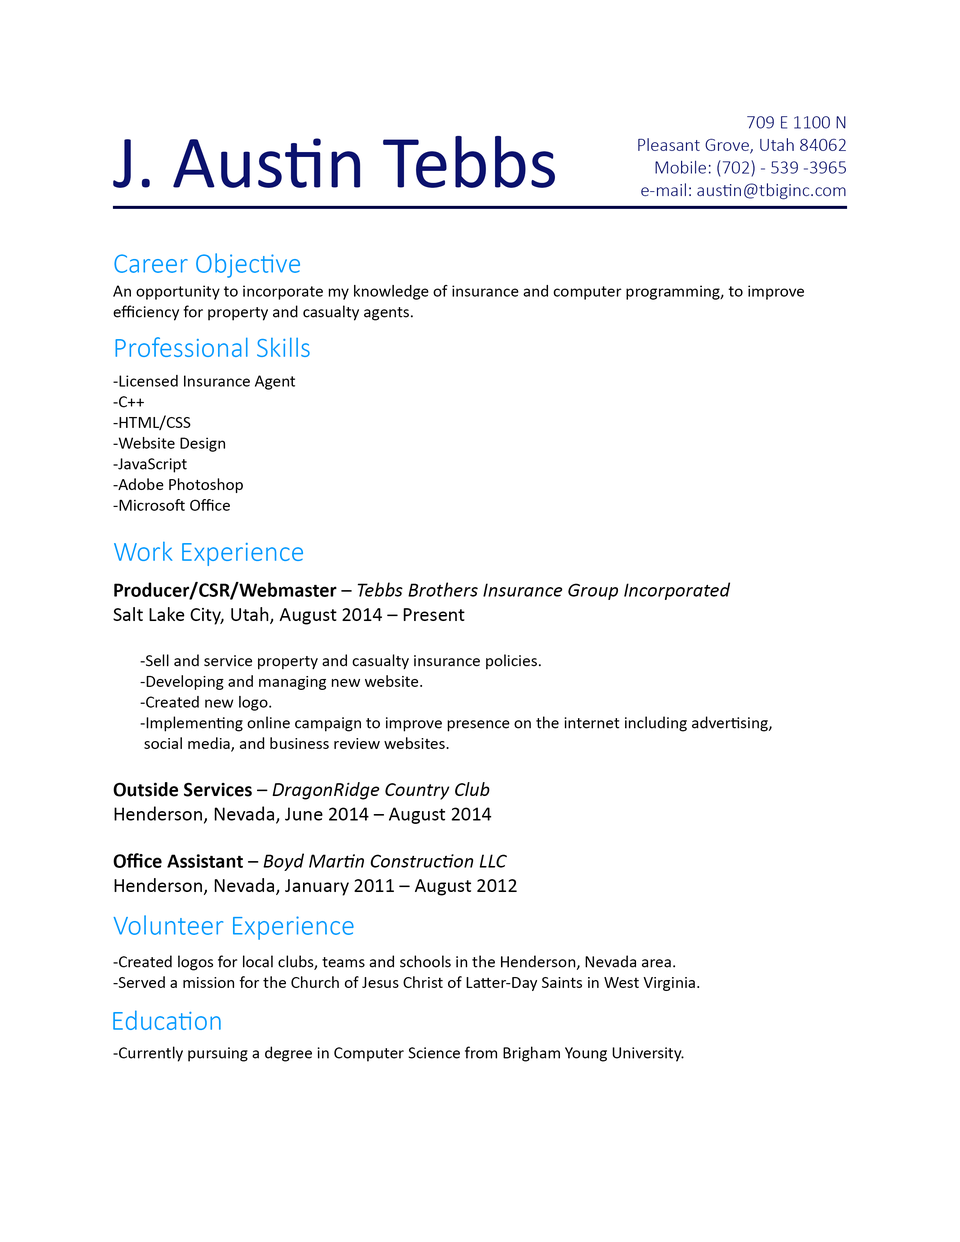
<style>
.page{position:relative;width:960px;height:1242px;background:#ffffff}
.page>*{position:absolute;margin:0}
.t1{font:18.8px "Calibri-Light";color:#0b126e}
.t2{font:75.3px "Calibri";color:#0b126e}
.t3{font:28.2px "Calibri-Light";color:#009cff}
.t4{font:17.3px "Calibri";color:#000000}
.t5{font:20.4px "Calibri-Bold";color:#000000}
.t6{font:20.4px "Calibri";color:#000000}
.t7{font:20.4px "Calibri-Italic";color:#000000}
</style>
<div class="page">
<p class="t1" style="left:638px;top:116px;width:208px;height:83px;text-align:right">709 E 1100 N<br>Pleasant Grove, Utah 84062<br>Mobile: (702) - 539 -3965<br>e-mail: austin@tbiginc.com</p>
<p class="t2" style="left:113px;top:136px;width:442px;height:52px">J. Austin Tebbs</p>
<p class="t3" style="left:114px;top:253px;width:186px;height:25px">Career Objective</p>
<p class="t4" style="left:113px;top:285px;width:691px;height:35px">An opportunity to incorporate my knowledge of insurance and computer programming, to improve efficiency for property and casualty agents.</p>
<p class="t3" style="left:115px;top:337px;width:195px;height:20px">Professional Skills</p>
<p class="t4" style="left:113px;top:375px;width:182px;height:136px">-Licensed Insurance Agent<br>-C++<br>-HTML/CSS<br>-Website Design<br>-JavaScript<br>-Adobe Photoshop<br>-Microsoft Office</p>
<p class="t3" style="left:114px;top:542px;width:189px;height:24px">Work Experience</p>
<p class="t4" style="left:113px;top:582px;width:659px;height:314px"><span class="t5">Producer/CSR/Webmaster</span><span class="t6"> – </span><span class="t7">Tebbs Brothers Insurance Group Incorporated<br></span><span class="t6">Salt Lake City, Utah, August 2014 – Present<br><br>  </span>-Sell and service property and casualty insurance policies.<br>  -Developing and managing new website.<br>  -Created new logo.<br>  -Implementing online campaign to improve presence on the internet including advertising,              social media, and business review websites.<br><br><span class="t5">Outside Services</span><span class="t6"> – </span><span class="t7">DragonRidge Country Club<br></span><span class="t6">Henderson, Nevada, June 2014 – August 2014<br><br></span><span class="t5">Office Assistant</span><span class="t6"> – </span><span class="t7">Boyd Martin Construction LLC<br></span><span class="t6">Henderson, Nevada, January 2011 – August 2012</span></p>
<p class="t3" style="left:113px;top:915px;width:241px;height:25px">Volunteer Experience</p>
<p class="t4" style="left:113px;top:956px;width:586px;height:35px">-Created logos for local clubs, teams and schools in the Henderson, Nevada area.<br>-Served a mission for the Church of Jesus Christ of Latter-Day Saints in West Virginia.</p>
<p class="t3" style="left:113px;top:1011px;width:108px;height:19px">Education</p>
<p class="t4" style="left:113px;top:1047px;width:571px;height:15px">-Currently pursuing a degree in Computer Science from Brigham Young University.</p>
</div>
